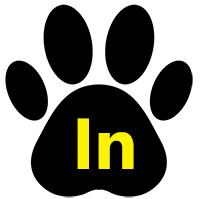
<style>
.page{position:relative;width:200px;height:199px;background:#000000}
.page>*{position:absolute;margin:0}
.t1{font:72px "NirmalaUI-Bold";color:#fbf205}
</style>
<div class="page">
<p class="t1" style="left:77px;top:118px;width:57px;height:51px">In</p>
</div>
